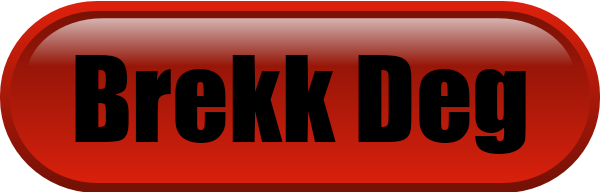
<style>
.page{position:relative;width:600px;height:192px;background:#000000}
.page>*{position:absolute;margin:0}
.t1{font:55.1px "Impact";color:#000000}
</style>
<div class="page">
<p class="t1" style="left:75px;top:55px;width:451px;height:99px">Brekk Deg</p>
</div>
